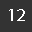
<style>
.page{position:relative;width:32px;height:32px;background:#333333}
.page>*{position:absolute;margin:0}
.t1{font:17.8px "MyriadPro-Regular";color:#ffffff;scale:1.12 1}
</style>
<div class="page">
<p class="t1" style="left:9px;top:9px;width:16px;height:12px">12</p>
</div>
